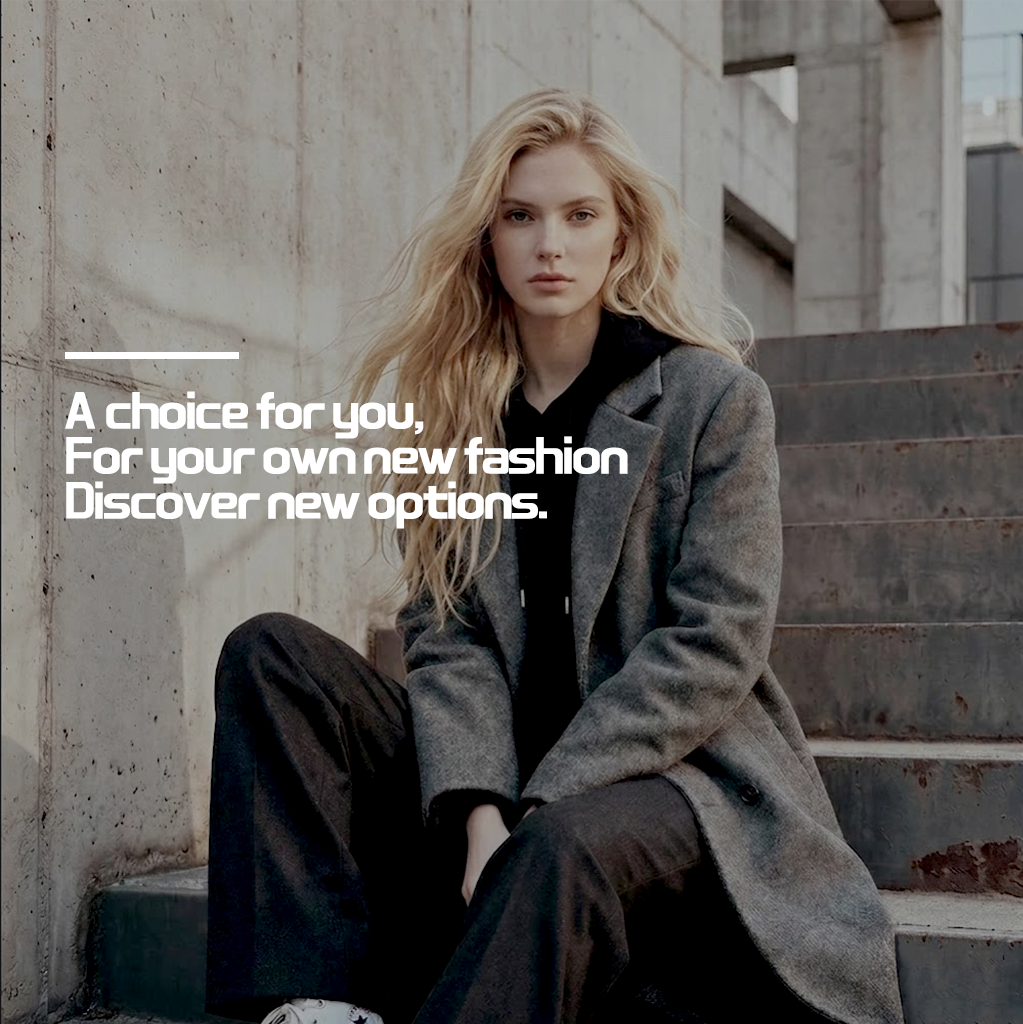
<style>
.page{position:relative;width:1023px;height:1024px}
.page>*{position:absolute;margin:0}
.t1{font:40px/45px "KBLJump_BTTF";letter-spacing:-0.025em;color:#ffffff;font-weight:bold}
</style>
<div class="page">
<p class="t1" style="left:65px;top:391px;width:563px;height:138px">A choice for you,<br>For your own new fashion<br>Discover new options.</p>
</div>
